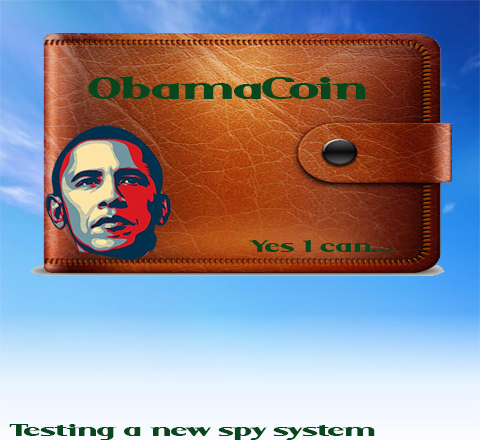
<style>
.page{position:relative;width:480px;height:440px}
.page>*{position:absolute;margin:0}
.t1{font:34.1px "SerifBlack";letter-spacing:0.025em;color:#08471e;scale:1.78 1}
.t2{font:18.9px "SerifBlack";letter-spacing:0.025em;color:#08471e;scale:1.79 1}
.t3{font:18.9px "SerifBlack";letter-spacing:0.025em;color:#08471e;scale:1.93 1}
</style>
<div class="page">
<p class="t1" style="left:88px;top:76px;width:278px;height:23px">ObamaCoin</p>
<p class="t2" style="left:249px;top:240px;width:144px;height:12px">Yes I can...</p>
<p class="t3" style="left:9px;top:424px;width:366px;height:16px">Testing a new spy system</p>
</div>
